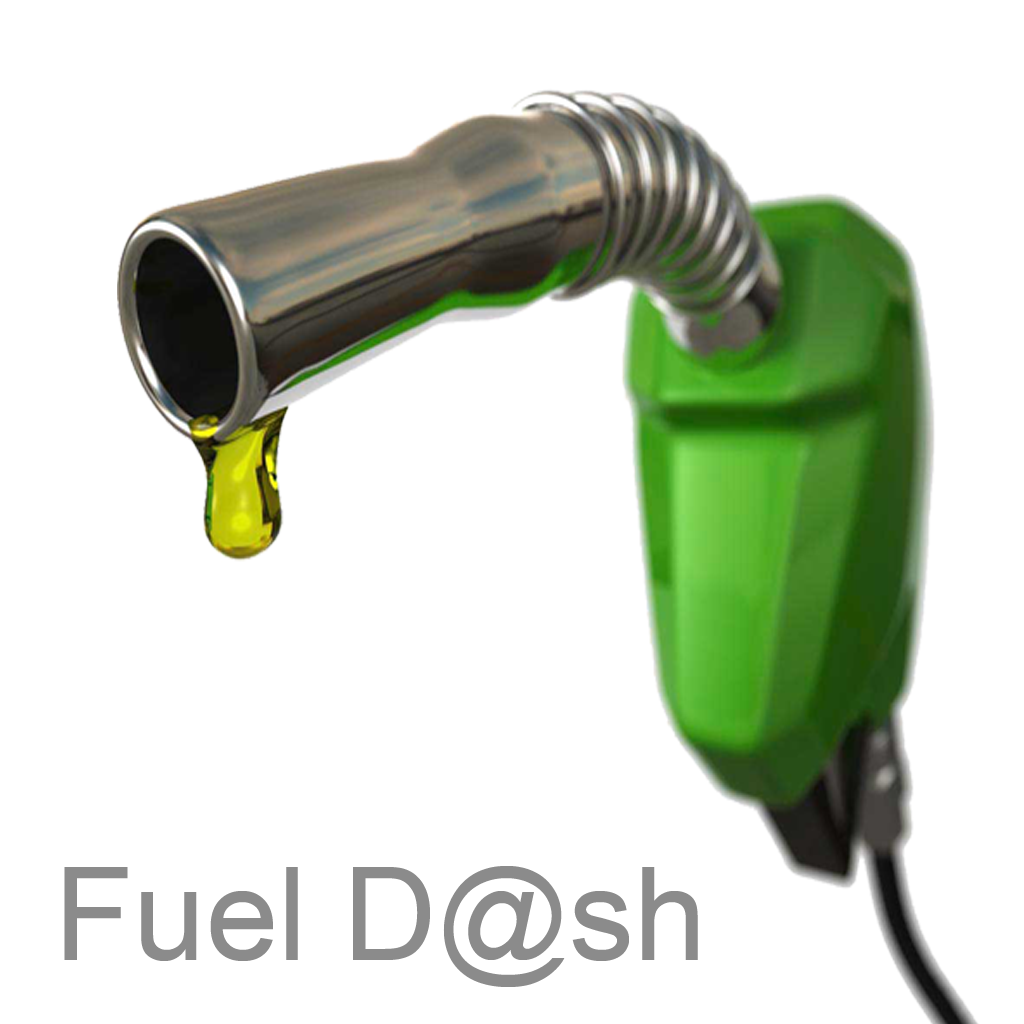
<style>
.page{position:relative;width:1024px;height:1024px;background:#ffffff}
.page>*{position:absolute;margin:0}
.t1{font:130px "ArialMT";color:#8b8b8b}
</style>
<div class="page">
<p class="t1" style="left:64px;top:866px;width:634px;height:121px">Fuel D@sh</p>
</div>
